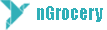
<style>
.page{position:relative;width:107px;height:30px;background:#ffffff}
.page>*{position:absolute;margin:0}
.t1{font:18px "Impact";color:#30afb8}
</style>
<div class="page">
<p class="t1" style="left:37px;top:6px;width:66px;height:16px">nGrocery</p>
</div>
